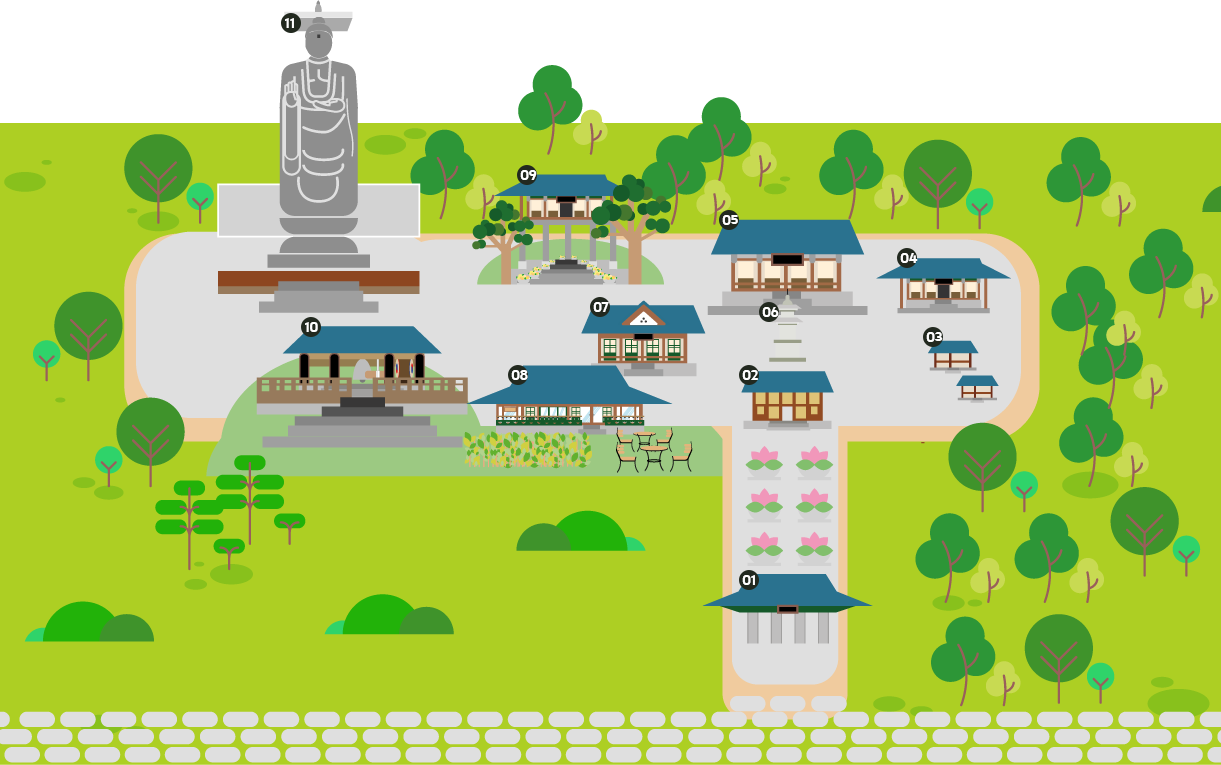
<style>
.page{position:relative;width:1221px;height:765px;background:#adcf23}
.page>*{position:absolute;margin:0}
.t1{font:12px "Cafe24Ohsquare";color:#ffffff}
</style>
<div class="page">
<p class="t1" style="left:285px;top:18px;width:9px;height:10px">11</p>
<p class="t1" style="left:520px;top:170px;width:17px;height:10px">09</p>
<p class="t1" style="left:722px;top:215px;width:16px;height:10px">05</p>
<p class="t1" style="left:900px;top:253px;width:18px;height:10px">04</p>
<p class="t1" style="left:593px;top:302px;width:16px;height:10px">07</p>
<p class="t1" style="left:762px;top:307px;width:17px;height:10px">06</p>
<p class="t1" style="left:305px;top:322px;width:13px;height:10px">10</p>
<p class="t1" style="left:926px;top:332px;width:17px;height:10px">03</p>
<p class="t1" style="left:511px;top:370px;width:17px;height:10px">08</p>
<p class="t1" style="left:742px;top:370px;width:16px;height:10px">02</p>
<p class="t1" style="left:742px;top:575px;width:13px;height:10px">01</p>
</div>
